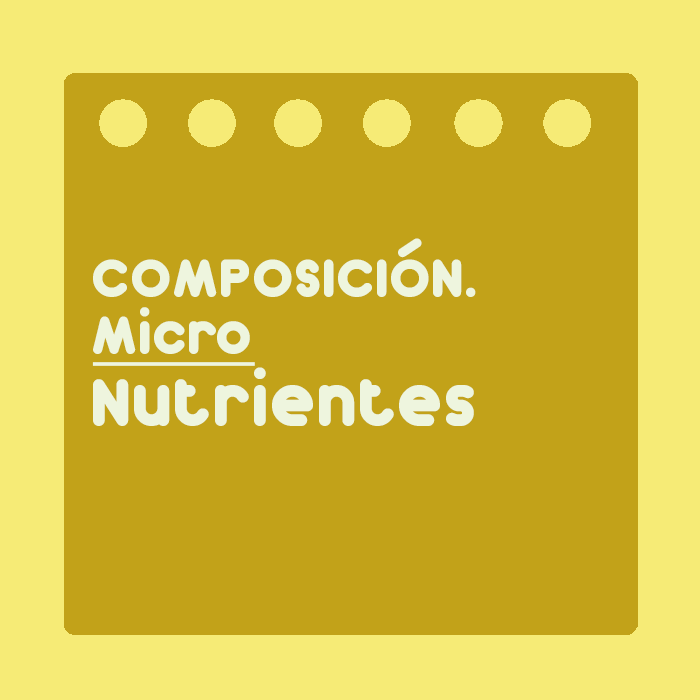
<style>
.page{position:relative;width:700px;height:700px;background:#c2a219}
.page>*{position:absolute;margin:0}
.t1{font:48px "Dunkin";color:#eef5de}
.t2{font:48px "Dunkin";color:#eef5de;text-decoration:underline}
.t3{font:60px "Dunkin";color:#eef5de}
</style>
<div class="page">
<p class="t1" style="left:92px;top:238px;width:384px;height:188px">COMPOSICIÓN. <br><span class="t2">Micro<br></span><span class="t3">Nutrientes</span></p>
</div>
